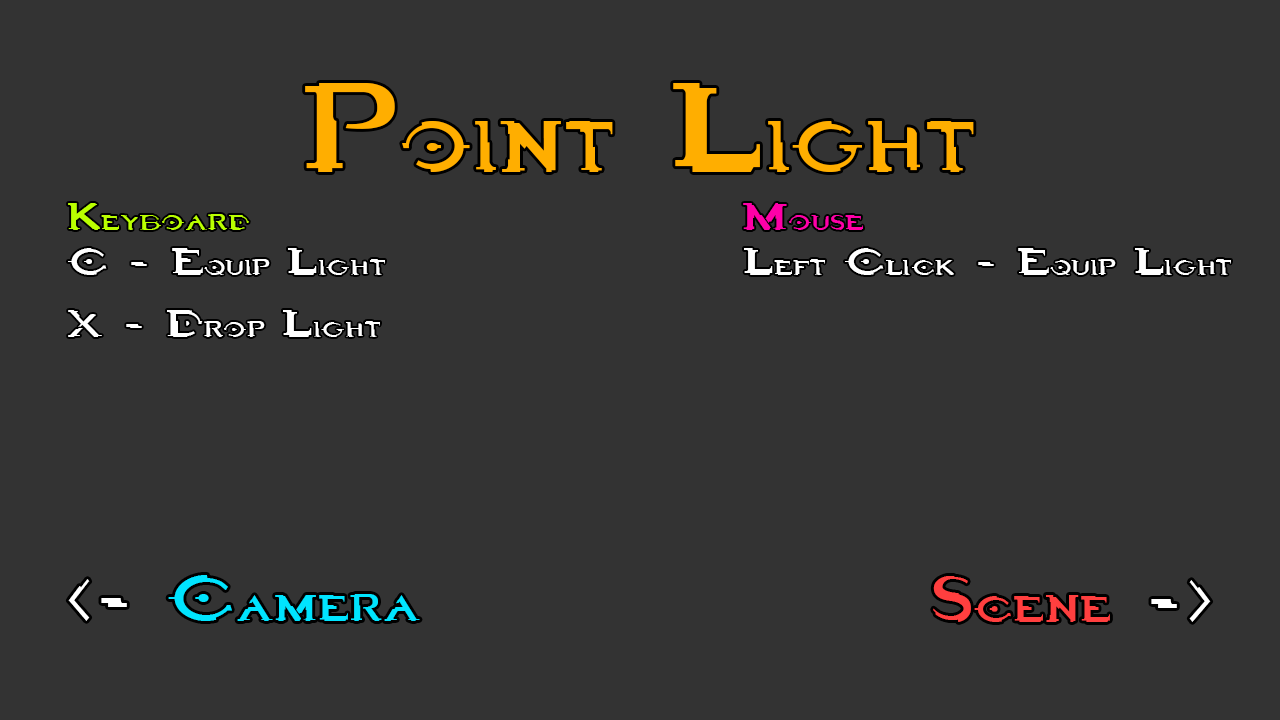
<style>
.page{position:relative;width:1280px;height:720px;background:#333333}
.page>*{position:absolute;margin:0}
.t1{font:169.3px "Halo3";color:#ffae00;scale:0.64 1}
.t2{font:51.4px "Halo3";color:#baff00;scale:0.68 1}
.t3{font:51.4px "Halo3";color:#ff00a8;scale:0.68 1}
.t4{font:51.4px "Halo3";color:#ffffff;scale:0.68 1}
.t5{font:87.9px "Halo3";color:#00e4ff;scale:0.67 1}
.t6{font:87.9px "Halo3";color:#ffffff;scale:0.67 1}
.t7{font:87.9px "Halo3";color:#ff3f3f;scale:0.67 1}
</style>
<div class="page">
<p class="t1" style="left:305px;top:83px;width:669px;height:89px">Point Light</p>
<p class="t2" style="left:68px;top:203px;width:181px;height:27px">Keyboard</p>
<p class="t3" style="left:743px;top:203px;width:120px;height:27px">Mouse</p>
<p class="t4" style="left:68px;top:248px;width:317px;height:89px">C - Equip Light<br>X - Drop Light</p>
<p class="t4" style="left:744px;top:248px;width:487px;height:27px">Left Click - Equip Light</p>
<p class="t5" style="left:68px;top:575px;width:352px;height:46px"><span class="t6">&lt;- </span>Camera</p>
<p class="t7" style="left:933px;top:576px;width:278px;height:46px">Scene<span class="t6"> -&gt;</span></p>
</div>
